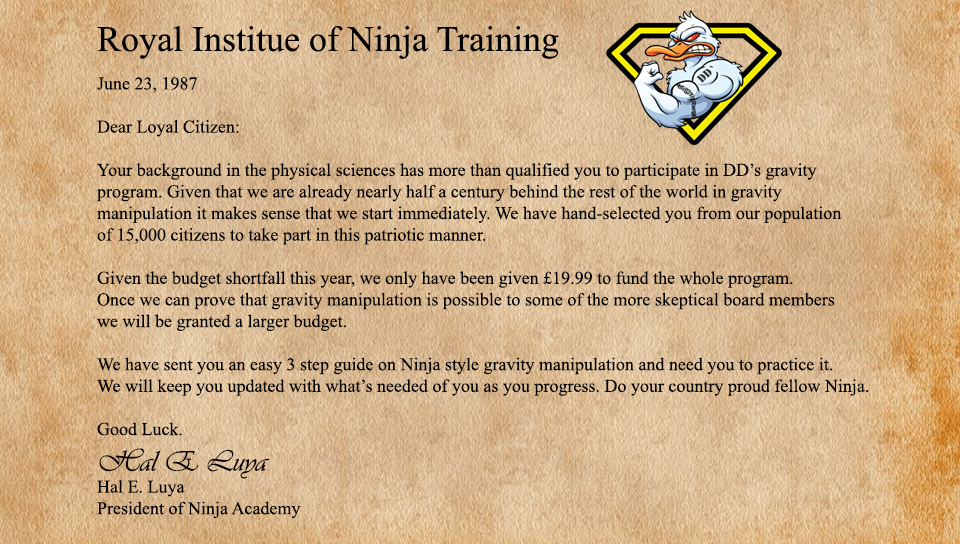
<style>
.page{position:relative;width:960px;height:544px}
.page>*{position:absolute;margin:0}
.t1{font:18px "TimesNewRomanPSMT";color:#000000}
.t2{font:36px "TimesNewRomanPSMT";color:#000000}
.t3{font:30px "Vivaldii";color:#000000}
</style>
<div class="page">
<p class="t1" style="left:96px;top:25px;width:773px;height:494px;text-align:right"><span class="t2">Royal Institue of Ninja Training<br><br></span>June 23, 1987<br><br>Dear Loyal Citizen:<br><br>Your background in the physical sciences has more than qualified you to participate in DD’s gravity <br>program. Given that we are already nearly half a century behind the rest of the world in gravity<br>manipulation it makes sense that we start immediately. We have hand-selected you from our population<br>of 15,000 citizens to take part in this patriotic manner.<br><br>Given the budget shortfall this year, we only have been given £19.99 to fund the whole program. <br>Once we can prove that gravity manipulation is possible to some of the more skeptical board members<br>we will be granted a larger budget.<br><br>We have sent you an easy 3 step guide on Ninja style gravity manipulation and need you to practice it. <br>We will keep you updated with what’s needed of you as you progress. Do your country proud fellow Ninja.<br><br>Good Luck.<br><span class="t3">Hal E Luya<br></span>Hal E. Luya<br>President of Ninja Academy</p>
</div>
